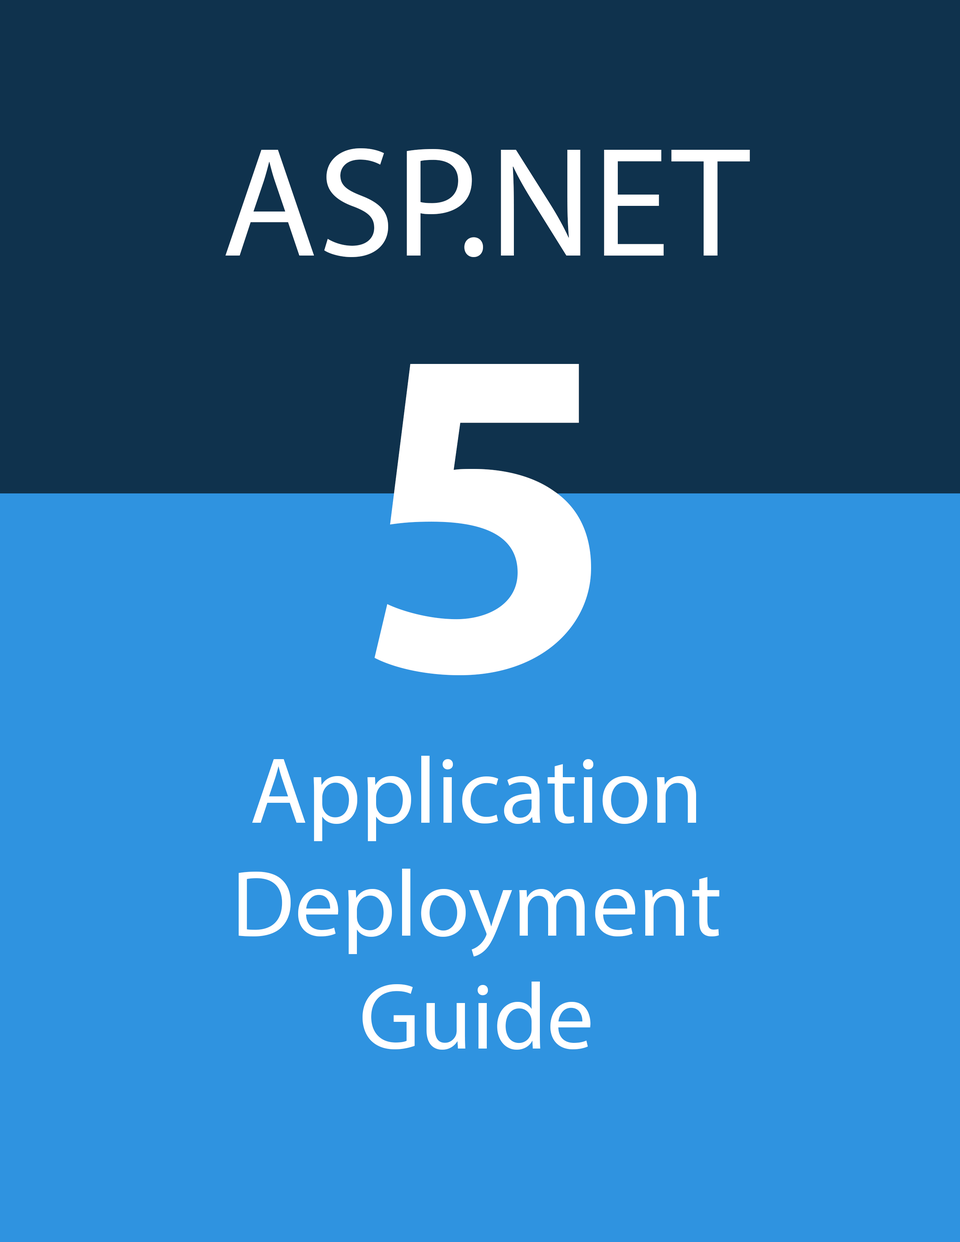
<style>
.page{position:relative;width:960px;height:1242px;background:#2f93e0}
.page>*{position:absolute;margin:0}
.t1{font:156.8px "MyriadPro-Regular";color:#ffffff}
.t2{font:470.5px "MyriadPro-Bold";color:#ffffff}
.t3{font:94.1px "MyriadPro-Regular";color:#ffffff}
</style>
<div class="page">
<p class="t1" style="left:225px;top:148px;width:525px;height:109px">ASP.NET</p>
<p class="t2" style="left:375px;top:364px;width:216px;height:311px">5</p>
<p class="t3" style="left:239px;top:756px;width:480px;height:294px;text-align:center">Application<br>Deployment<br>Guide</p>
</div>
